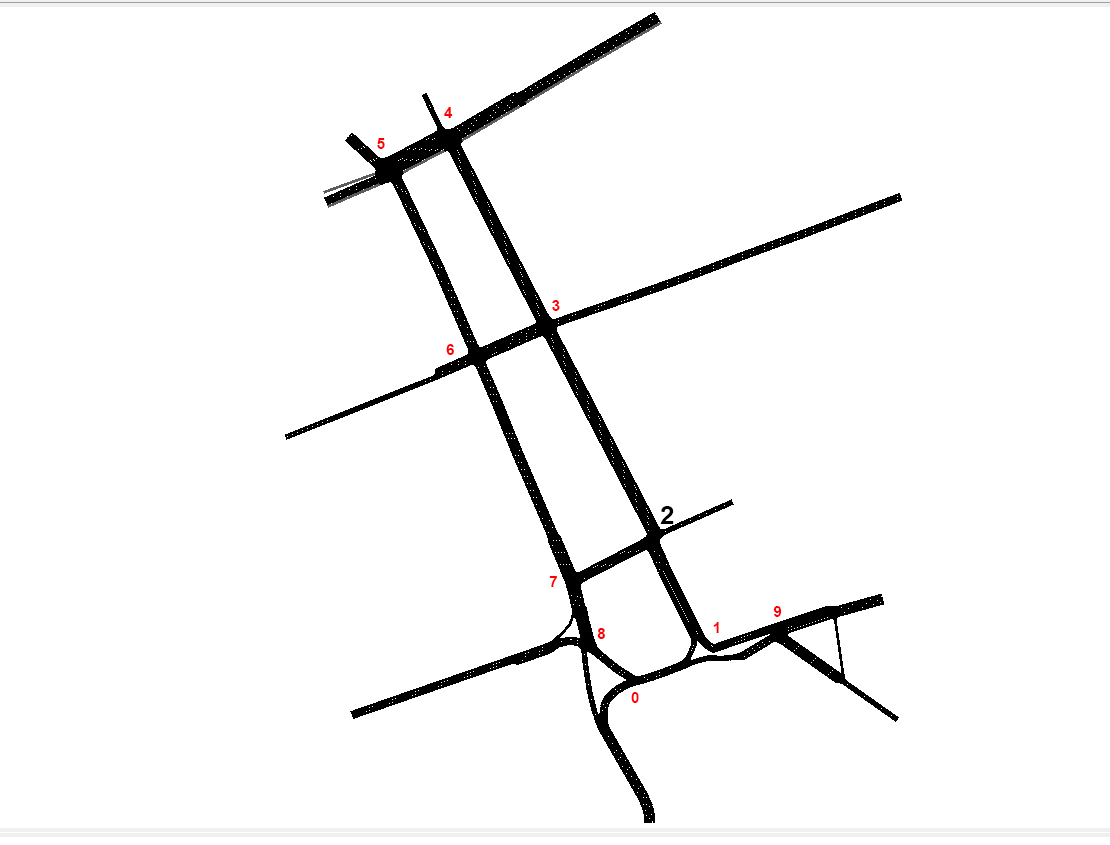
<style>
.page{position:relative;width:1110px;height:845px;background:#ffffff}
.page>*{position:absolute;margin:0}
.t1{font:14.7px "Arial-BoldMT";color:#ff0000}
.t2{font:25.3px "Arial-BoldMT";color:#000000}
</style>
<div class="page">
<p class="t1" style="left:444px;top:107px;width:9px;height:11px">4</p>
<p class="t1" style="left:377px;top:138px;width:8px;height:11px">5</p>
<p class="t1" style="left:552px;top:300px;width:8px;height:11px">3</p>
<p class="t1" style="left:446px;top:344px;width:8px;height:11px">6</p>
<p class="t2" style="left:660px;top:506px;width:14px;height:18px">2</p>
<p class="t1" style="left:549px;top:576px;width:8px;height:11px">7</p>
<p class="t1" style="left:773px;top:606px;width:9px;height:11px">9</p>
<p class="t1" style="left:597px;top:628px;width:8px;height:11px">8</p>
<p class="t1" style="left:713px;top:622px;width:6px;height:11px">1</p>
<p class="t1" style="left:631px;top:692px;width:8px;height:11px">0</p>
</div>
